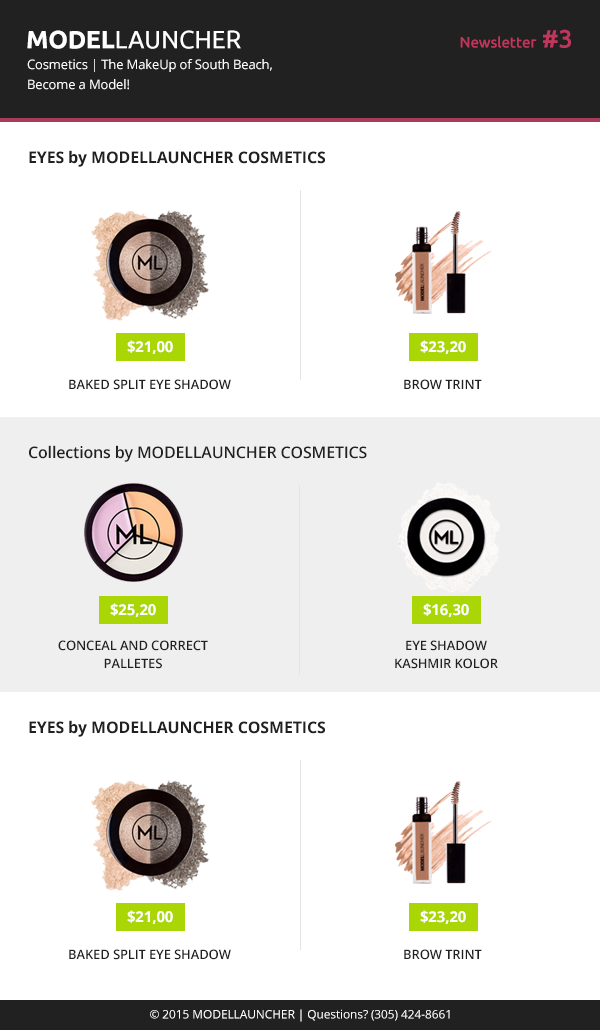
<style>
.page{position:relative;width:600px;height:1030px;background:#ffffff}
.page>*{position:absolute;margin:0}
.t1{font:25px "Ubuntu";letter-spacing:-0.01em;color:#ffffff}
.t2{font:25px "Ubuntu-Bold";letter-spacing:-0.01em;color:#ffffff}
.t3{font:15px "Ubuntu-Medium";letter-spacing:-0.01em;color:#c1365d}
.t4{font:25px "Ubuntu-Medium";letter-spacing:-0.01em;color:#c1365d}
.t5{font:13px/20px "OpenSans";letter-spacing:-0.01em;color:#ffffff}
.t6{font:16px "OpenSans-Bold";letter-spacing:-0.01em;color:#212121}
.t7{font:15px "OpenSans-Bold";letter-spacing:-0.01em;color:#ffffff}
.t8{font:13px "OpenSans-Semibold";letter-spacing:-0.01em;color:#212121}
.t9{font:16px "OpenSans-Semibold";letter-spacing:-0.01em;color:#212121}
.t10{font:13px/18px "OpenSans-Semibold";letter-spacing:-0.01em;color:#212121}
.t11{font:12px "OpenSans";letter-spacing:-0.01em;color:#ffffff}
</style>
<div class="page">
<p class="t1" style="left:27px;top:30px;width:214px;height:19px"><span class="t2">MODEL</span>LAUNCHER</p>
<p class="t3" style="left:460px;top:29px;width:111px;height:19px">Newsletter<span class="t4"> #3</span></p>
<p class="t5" style="left:27px;top:59px;width:245px;height:31px">Cosmetics | The MakeUp of South Beach,<br>Become a Model!</p>
<p class="t6" style="left:29px;top:150px;width:296px;height:17px">EYES by MODELLAUNCHER COSMETICS</p>
<p class="t7" style="left:127px;top:340px;width:46px;height:14px">$21,00</p>
<p class="t7" style="left:420px;top:340px;width:46px;height:14px">$23,20</p>
<p class="t8" style="left:69px;top:379px;width:162px;height:11px">BAKED SPLIT EYE SHADOW</p>
<p class="t8" style="left:404px;top:379px;width:78px;height:11px">BROW TRINT</p>
<p class="t9" style="left:29px;top:445px;width:338px;height:17px">Collections by MODELLAUNCHER COSMETICS</p>
<p class="t7" style="left:110px;top:603px;width:46px;height:14px">$25,20</p>
<p class="t7" style="left:423px;top:603px;width:46px;height:14px">$16,30</p>
<p class="t10" style="left:58px;top:640px;width:150px;height:29px;text-align:center">CONCEAL AND CORRECT<br>PALLETES</p>
<p class="t10" style="left:395px;top:640px;width:103px;height:29px;text-align:center">EYE SHADOW<br>KASHMIR KOLOR</p>
<p class="t6" style="left:29px;top:720px;width:296px;height:17px">EYES by MODELLAUNCHER COSMETICS</p>
<p class="t7" style="left:127px;top:910px;width:46px;height:14px">$21,00</p>
<p class="t7" style="left:420px;top:910px;width:46px;height:14px">$23,20</p>
<p class="t8" style="left:69px;top:949px;width:162px;height:11px">BAKED SPLIT EYE SHADOW</p>
<p class="t8" style="left:404px;top:949px;width:78px;height:11px">BROW TRINT</p>
<p class="t11" style="left:150px;top:1009px;width:300px;height:13px">© 2015 MODELLAUNCHER | Questions? (305) 424-8661</p>
</div>
